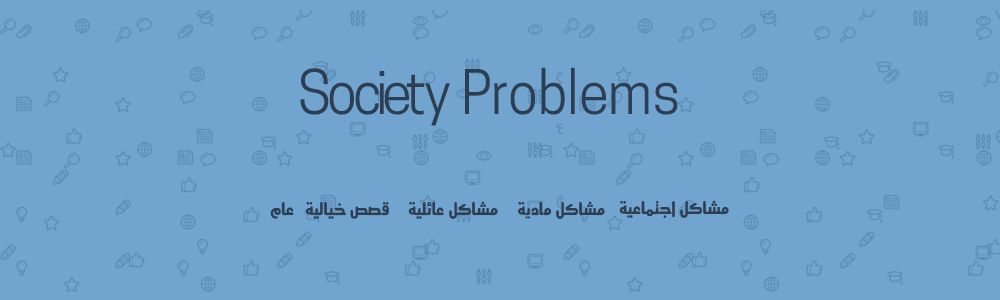
<style>
.page{position:relative;width:1000px;height:300px;background:#71a4ce}
.page>*{position:absolute;margin:0}
.t1{font:57.8px "CooperHewitt-Book";color:#2d3e52;scale:0.94 1}
.t2{font:16.9px "Motken-Unicode-Anbobi";color:#2d3e52;scale:0.94 1}
</style>
<div class="page">
<p class="t1" style="left:300px;top:67px;width:378px;height:59px">Society Problems</p>
<p class="t2" style="left:270px;top:201px;width:24px;height:18px">عام</p>
<p class="t2" style="left:306px;top:201px;width:83px;height:18px">قصص خيالية</p>
<p class="t2" style="left:408px;top:201px;width:90px;height:18px">مشاكل عائلية</p>
<p class="t2" style="left:518px;top:201px;width:87px;height:18px">مشاكل مادية</p>
<p class="t2" style="left:619px;top:200px;width:110px;height:18px">مشاكل اجتماعية</p>
</div>
